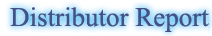
<style>
.page{position:relative;width:212px;height:36px}
.page>*{position:absolute;margin:0}
.t1{font:27px "TimesNewRomanPSMT";color:#445186}
</style>
<div class="page">
<p class="t1" style="left:10px;top:7px;width:199px;height:25px">Distributor Report</p>
</div>
